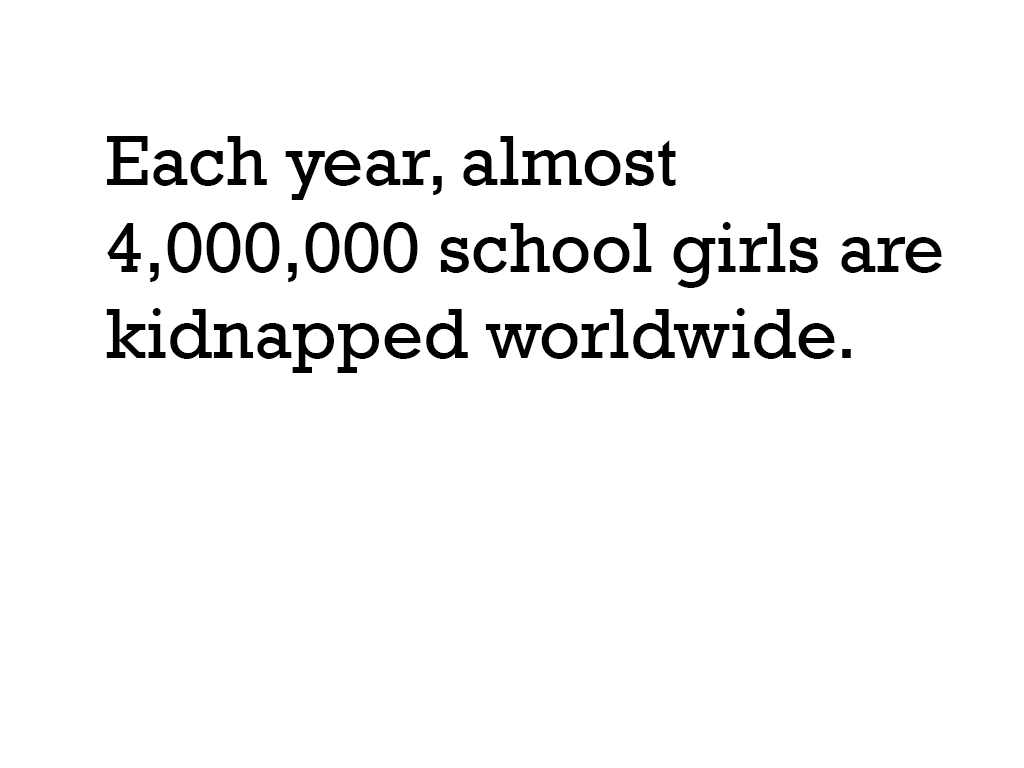
<style>
.page{position:relative;width:1024px;height:768px;background:#ffffff}
.page>*{position:absolute;margin:0}
.t1{font:72px "Rockwell";color:#000000}
</style>
<div class="page">
<p class="t1" style="left:106px;top:136px;width:836px;height:237px">Each year, almost 4,000,000 school girls are kidnapped worldwide.</p>
</div>
